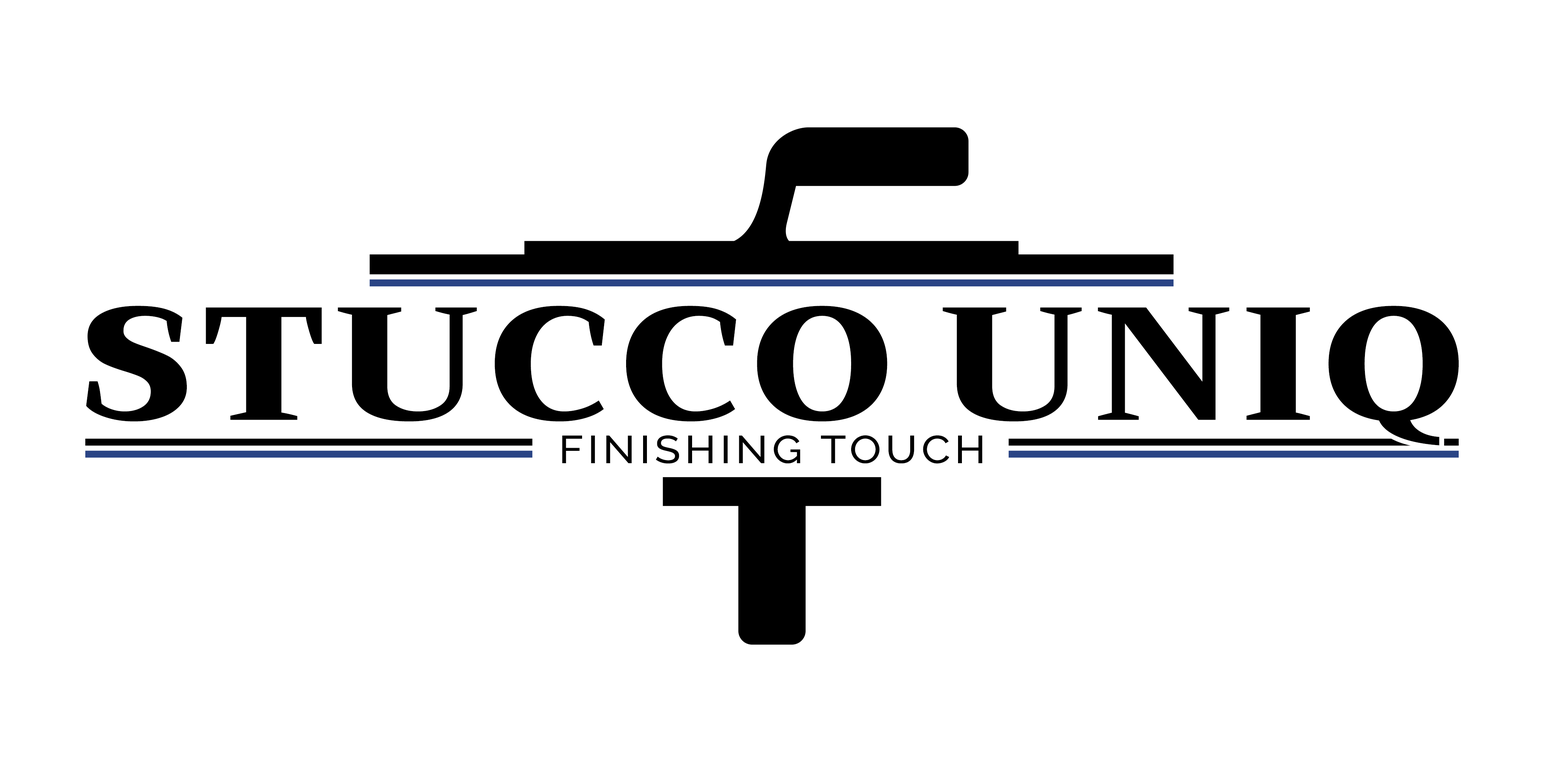
<style>
.page{position:relative;width:1544px;height:772px;background:#ffffff}
.page>*{position:absolute;margin:0}
.t1{font:160.5px "Trirong-Black";letter-spacing:0.05em;color:#000000;scale:1.1 1}
.t2{font:160.5px "Trirong-Black";color:#000000;scale:1.1 1}
.t3{font:38.9px "Raleway-Medium";letter-spacing:0.1em;color:#000000;text-transform:uppercase;scale:1.09 1}
</style>
<div class="page">
<p class="t1" style="left:86px;top:306px;width:1373px;height:140px">STUCC<span class="t2">O </span>UNIQ</p>
<p class="t3" style="left:562px;top:435px;width:421px;height:29px">Finishing touch</p>
</div>
